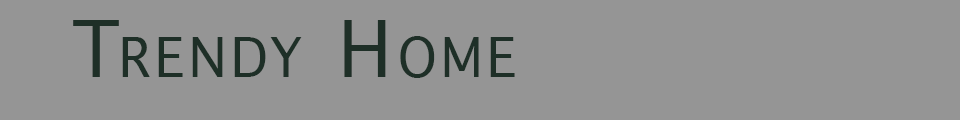
<style>
.page{position:relative;width:960px;height:120px;background:#959595}
.page>*{position:absolute;margin:0}
.t1{font:75px "Geneva";letter-spacing:0.1em;color:#1e2f27;font-variant:small-caps}
</style>
<div class="page">
<p class="t1" style="left:73px;top:20px;width:442px;height:58px">Trendy Home</p>
</div>
